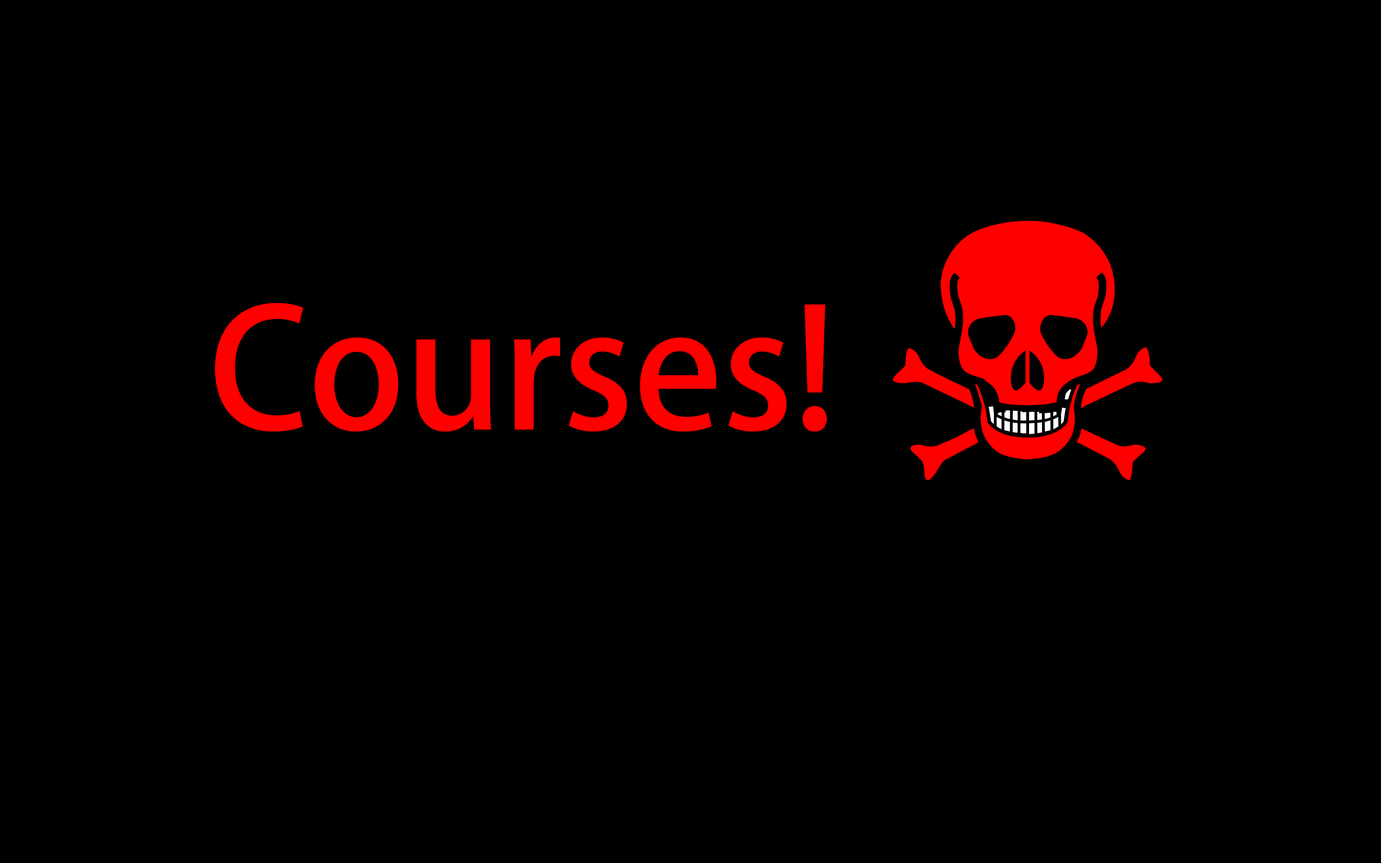
<style>
.page{position:relative;width:1381px;height:863px;background:#000000}
.page>*{position:absolute;margin:0}
.t1{font:163.7px "AdobeHeitiStd-Regular";color:#ff0000}
</style>
<div class="page">
<p class="t1" style="left:215px;top:303px;width:612px;height:129px">Courses!</p>
</div>
